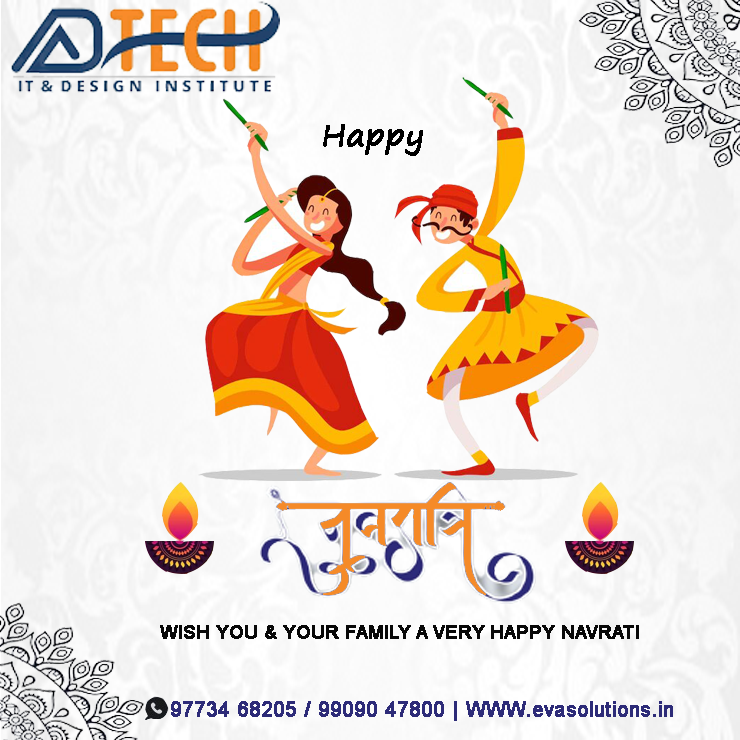
<style>
.page{position:relative;width:740px;height:740px}
.page>*{position:absolute;margin:0}
.t1{font:30px "SegoePrint";color:#000000;font-weight:bold}
.t2{font:18px "ArialMT";color:#080808;font-weight:bold}
.t3{font:20px "ArialMT";color:#2d2b78;font-weight:bold}
</style>
<div class="page">
<p class="t1" style="left:323px;top:124px;width:100px;height:32px">Happy</p>
<p class="t2" style="left:160px;top:625px;width:479px;height:14px">WISH YOU &amp; YOUR FAMILY A VERY HAPPY NAVRATI</p>
<p class="t3" style="left:171px;top:701px;width:502px;height:20px">97734 68205 / 99090 47800 | WWW.evasolutions.in</p>
</div>
